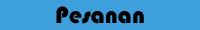
<style>
.page{position:relative;width:200px;height:30px;background:#3e9fdd}
.page>*{position:absolute;margin:0}
.t1{font:24px "Bauhaus93";color:#000000}
</style>
<div class="page">
<p class="t1" style="left:56px;top:6px;width:88px;height:18px">Pesanan</p>
</div>
